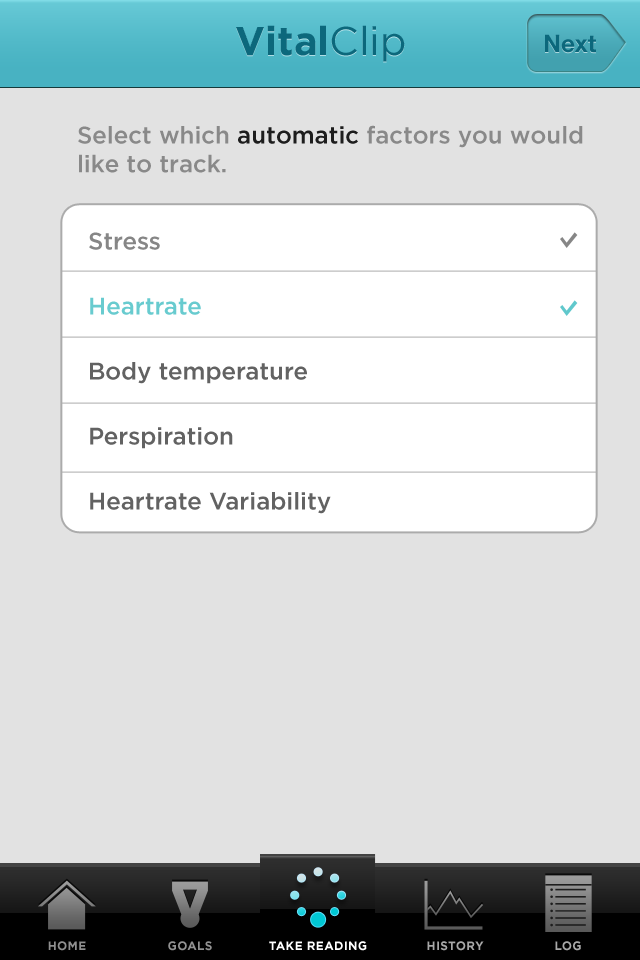
<style>
.page{position:relative;width:640px;height:960px;background:#e2e2e2}
.page>*{position:absolute;margin:0}
.t1{font:40px "Gotham-Bold";color:#0c687c}
.t2{font:40px "Gotham-Book";color:#0c687c}
.t3{font:24px "HelveticaNeue-Bold";color:#0c687c}
.t4{font:24px "Gotham-Medium";color:#898989}
.t5{font:24px "Gotham-Medium";color:#1d1d1d}
.t6{font:24px/65px "Gotham-Medium";color:#626262}
.t7{font:24px/65px "Gotham-Medium";color:#868686}
.t8{font:24px/65px "Gotham-Medium";color:#68cbcf}
.t9{font:12px "Gotham-Bold";letter-spacing:0.025em;color:#8f8f8f;text-transform:uppercase}
.t10{font:12px "Gotham-Bold";letter-spacing:0.025em;color:#929292;text-transform:uppercase}
.t11{font:12px "Gotham-Bold";letter-spacing:0.025em;color:#ffffff;text-transform:uppercase}
.t12{font:12px "Gotham-Bold";letter-spacing:0.025em;color:#a8a8a8;text-transform:uppercase}
</style>
<div class="page">
<p class="t1" style="left:236px;top:25px;width:169px;height:37px">Vital<span class="t2">Clip</span></p>
<p class="t3" style="left:545px;top:34px;width:51px;height:19px">Next</p>
<p class="t4" style="left:78px;top:125px;width:505px;height:48px">Select which <span class="t5">automatic </span>factors you would<br>like to track.</p>
<p class="t6" style="left:89px;top:232px;width:242px;height:282px"><span class="t7">Stress<br></span><span class="t8">Heartrate<br></span>Body temperature<br>Perspiration<br>Heartrate Variability</p>
<p class="t9" style="left:48px;top:941px;width:38px;height:10px">Home</p>
<p class="t10" style="left:168px;top:941px;width:44px;height:10px">Goals</p>
<p class="t11" style="left:269px;top:941px;width:98px;height:10px">Take reading</p>
<p class="t12" style="left:427px;top:941px;width:57px;height:10px">History</p>
<p class="t12" style="left:555px;top:941px;width:26px;height:10px">Log</p>
</div>
